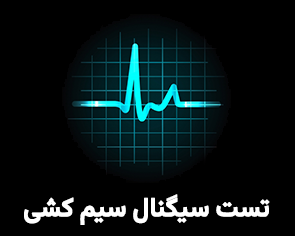
<style>
.page{position:relative;width:295px;height:236px;background:#000000}
.page>*{position:absolute;margin:0}
.t1{font:26.5px "Vazirmatn-Bold";letter-spacing:-0.01em;color:#ffffff;font-weight:bold;scale:0.94 1}
</style>
<div class="page">
<p class="t1" style="left:24px;top:194px;width:246px;height:31px">تست سیگنال سیم کشی</p>
</div>
